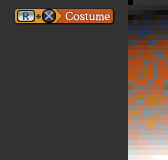
<style>
.page{position:relative;width:168px;height:160px;background:#333333}
.page>*{position:absolute;margin:0}
.t1{font:10.7px "MatissePro-M";color:#fefefe}
</style>
<div class="page">
<p class="t1" style="left:65px;top:11px;width:45px;height:10px">Costume</p>
</div>
